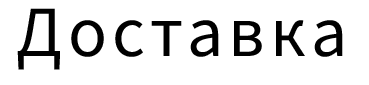
<style>
.page{position:relative;width:369px;height:85px;background:#ffffff}
.page>*{position:absolute;margin:0}
.t1{font:72px "SourceSansRoman-Regular";letter-spacing:0.075em;color:#000000}
</style>
<div class="page">
<p class="t1" style="left:17px;top:8px;width:326px;height:62px">Доставка</p>
</div>
